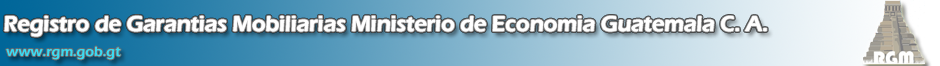
<style>
.page{position:relative;width:940px;height:66px}
.page>*{position:absolute;margin:0}
.t1{font:22px "ErasITC-Demi";color:#ffffff}
.t2{font:14px "ErasITC-Demi";color:#3adbf3}
</style>
<div class="page">
<p class="t1" style="left:4px;top:16px;width:763px;height:21px">Registro de Garantias Mobiliarias Ministerio de Economia Guatemala C. A.</p>
<p class="t2" style="left:6px;top:46px;width:115px;height:14px">www.rgm.gob.gt</p>
</div>
